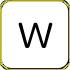
<style>
.page{position:relative;width:70px;height:70px;background:#ffffff}
.page>*{position:absolute;margin:0}
.t1{font:48px "NanumSquareRoundR";color:#000000}
</style>
<div class="page">
<p class="t1" style="left:18px;top:22px;width:35px;height:26px">w</p>
</div>
